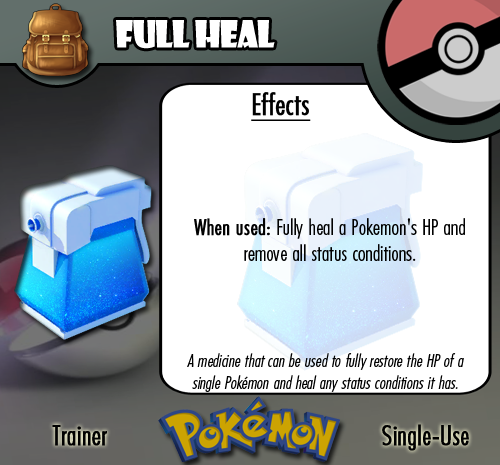
<style>
.page{position:relative;width:500px;height:465px;background:#ffffff}
.page>*{position:absolute;margin:0}
.t1{font:36.7px "ShowcardGothic-Reg";letter-spacing:-0.025em;color:#ffffff;scale:0.91 1}
.t2{font:22.2px "FuturaCondensedBQ-Light";color:#010101}
.t3{font:27.8px "FuturaCondensedBQ-Light";color:#010101;font-weight:bold}
.t4{font:30.6px "FuturaCondensedBQ-Light";color:#010101;font-weight:bold;text-decoration:underline}
.t5{font:22.2px "FuturaCondensedBQ-Light";color:#010101;font-weight:bold}
.t6{font:18.1px "FuturaCondensedBQ-Light";color:#010101;font-style:italic}
</style>
<div class="page">
<p class="t1" style="left:116px;top:20px;width:159px;height:29px">Full Heal</p>
<p class="t2" style="left:194px;top:92px;width:271px;height:169px"><span class="t3">  </span><span class="t4">Effects<br><br><br><br><br><br><br><br></span><span class="t5">When used: </span>Fully heal a Pokemon's HP and remove all status conditions.</p>
<p class="t6" style="left:187px;top:353px;width:277px;height:39px;text-align:center">A medicine that can be used to fully restore the HP of a single Pokémon and heal any status conditions it has.</p>
<p class="t3" style="left:52px;top:425px;width:55px;height:21px">Trainer</p>
<p class="t3" style="left:382px;top:424px;width:87px;height:27px">Single-Use</p>
</div>
